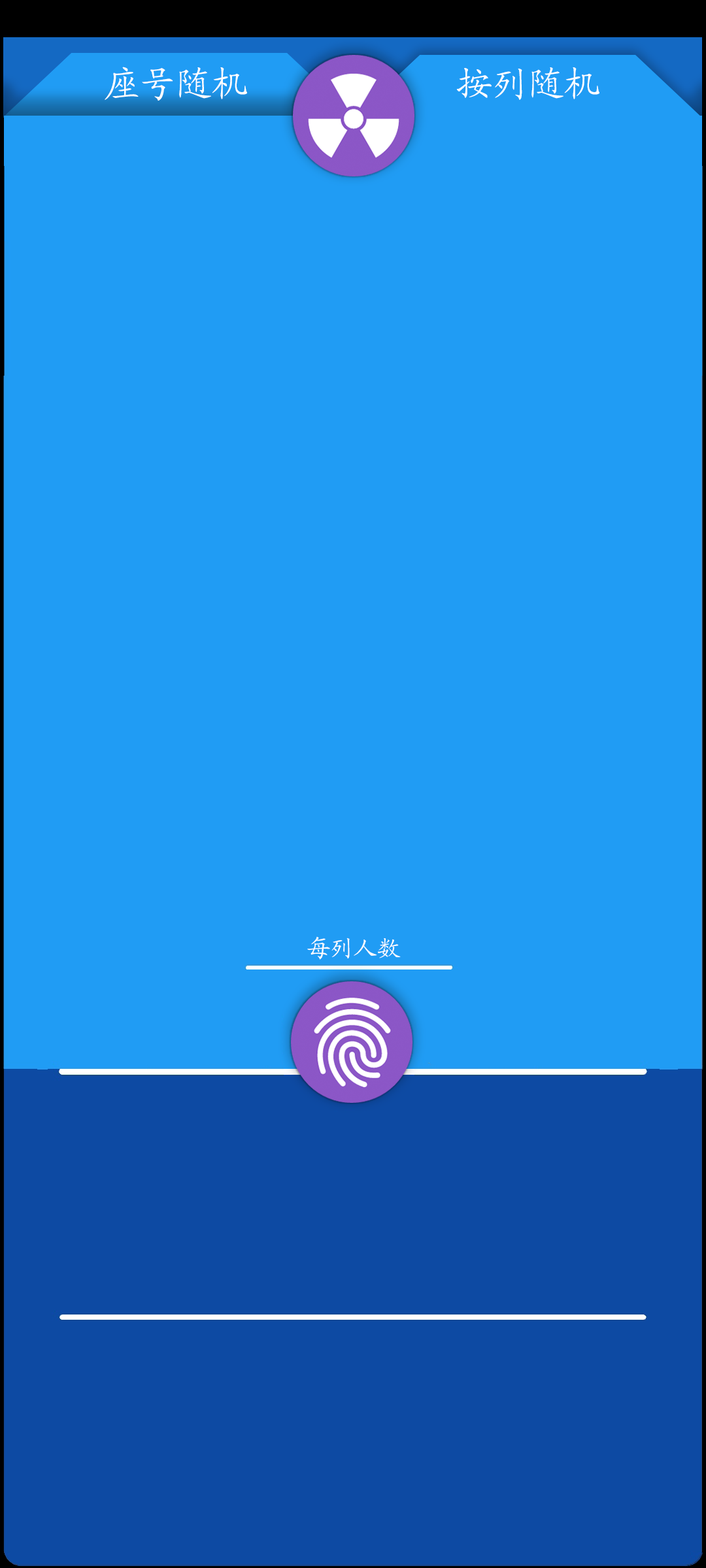
<style>
.page{position:relative;width:706px;height:1568px;background:#209cf4}
.page>*{position:absolute;margin:0}
.t1{font:35.9px "KaiTi_GB2312";color:#fffefe}
.t2{font:35.9px "KaiTi_GB2312";color:#ffffff}
.t3{font:23.3px "KaiTi_GB2312";color:#ffffff}
</style>
<div class="page">
<p class="t1" style="left:105px;top:67px;width:142px;height:34px">座号随机</p>
<p class="t2" style="left:456px;top:67px;width:143px;height:33px">按列随机</p>
<p class="t3" style="left:307px;top:937px;width:93px;height:23px">每列人数</p>
</div>
